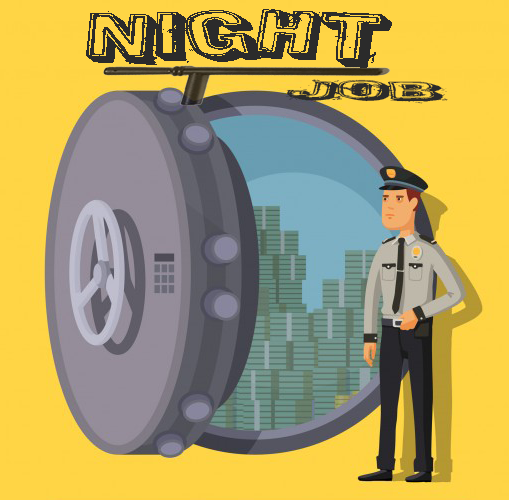
<style>
.page{position:relative;width:509px;height:500px;background:#ffd545}
.page>*{position:absolute;margin:0}
.t1{font:56px "HeavyRotation";color:#2b2b2b;scale:1.92 1}
.t2{font:21.8px "HeavyRotation";color:#2b2b2b;scale:4.02 1}
</style>
<div class="page">
<p class="t1" style="left:86px;top:9px;width:306px;height:59px">Night</p>
<p class="t2" style="left:286px;top:79px;width:162px;height:25px">Job</p>
</div>
